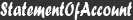
<style>
.page{position:relative;width:133px;height:20px;background:#333333}
.page>*{position:absolute;margin:0}
.t1{font:20.8px "ForteMT";color:#ffffff;scale:0.73 1}
</style>
<div class="page">
<p class="t1" style="left:0px;top:2px;width:132px;height:18px">StatementOfAccount</p>
</div>
